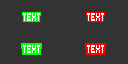
<style>
.page{position:relative;width:128px;height:64px;background:#333333}
.page>*{position:absolute;margin:0}
.t1{font:15.1px "SmallestPixel-7";color:#ffffff;scale:0.66 1}
</style>
<div class="page">
<p class="t1" style="left:23px;top:13px;width:17px;height:8px">Text</p>
<p class="t1" style="left:87px;top:13px;width:17px;height:8px">Text</p>
<p class="t1" style="left:23px;top:45px;width:17px;height:8px">Text</p>
<p class="t1" style="left:87px;top:45px;width:17px;height:8px">Text</p>
</div>
